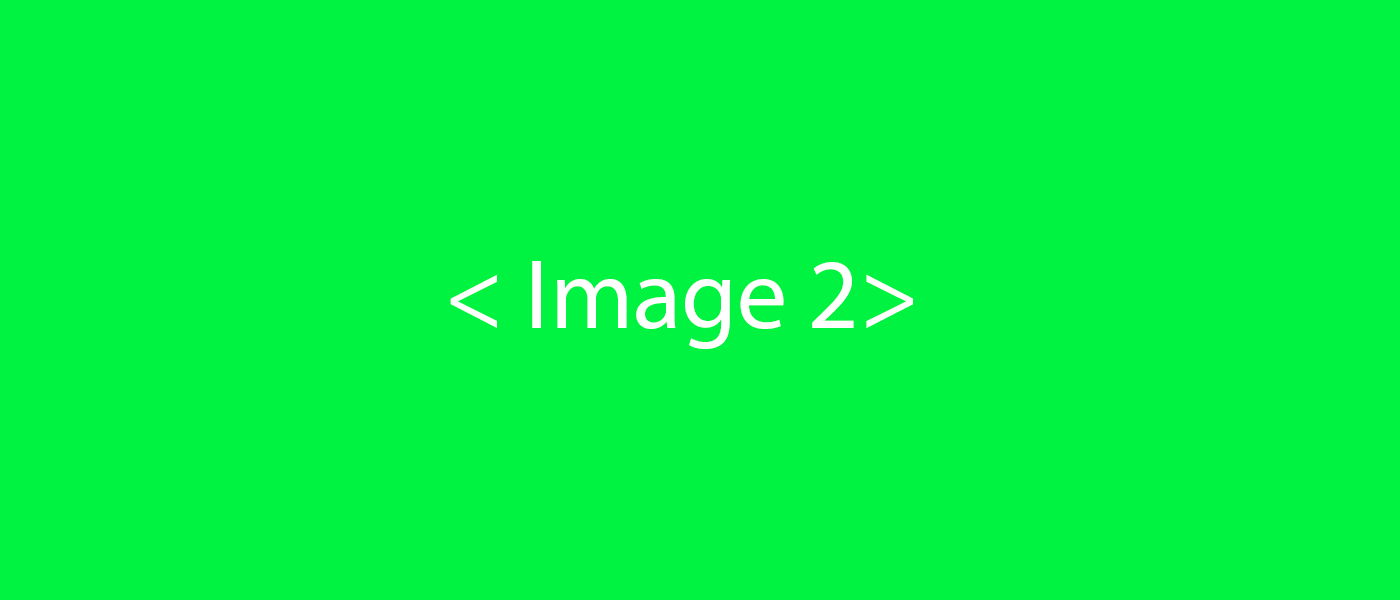
<style>
.page{position:relative;width:1400px;height:600px;background:#00f341}
.page>*{position:absolute;margin:0}
.t1{font:100px "MyriadPro-Regular";color:#ffffff}
</style>
<div class="page">
<p class="t1" style="left:450px;top:261px;width:463px;height:88px">&lt; Image 2&gt;</p>
</div>
